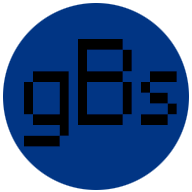
<style>
.page{position:relative;width:192px;height:192px;background:#013584}
.page>*{position:absolute;margin:0}
.t1{font:270.7px "Small Fonts";color:#000000}
</style>
<div class="page">
<p class="t1" style="left:24px;top:39px;width:153px;height:108px">gBs</p>
</div>
